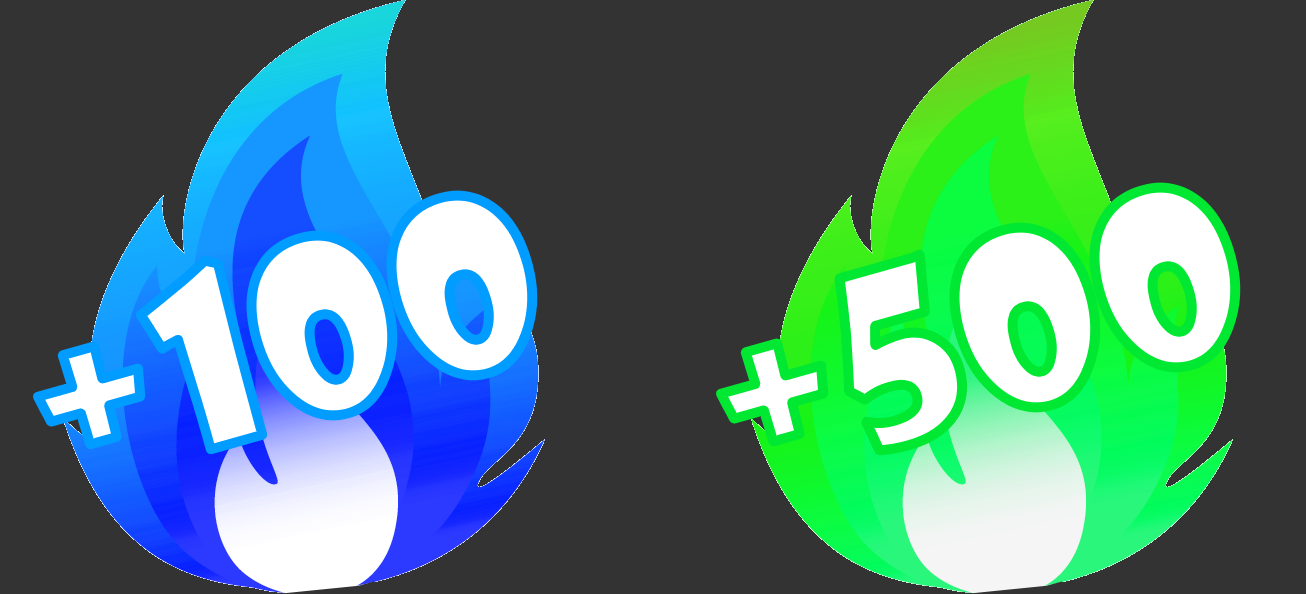
<style>
.page{position:relative;width:1306px;height:594px;background:#333333}
.page>*{position:absolute;margin:0}
.t1{font:234.8px "ShowcardGothic-Reg";color:#ffffff;scale:1.05 1}
</style>
<div class="page">
<p class="t1" style="left:37px;top:195px;width:496px;height:255px;rotate:-16deg">+100</p>
<p class="t1" style="left:720px;top:187px;width:516px;height:264px;rotate:-16deg">+500</p>
</div>
